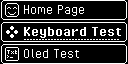
<style>
.page{position:relative;width:128px;height:64px;background:#000000}
.page>*{position:absolute;margin:0}
.t1{font:16px "PixelOperator";color:#ffffff}
.t2{font:16px "PixelOperator-Bold";color:#ffffff}
</style>
<div class="page">
<p class="t1" style="left:24px;top:5px;width:60px;height:11px">Home Page</p>
<p class="t2" style="left:24px;top:27px;width:97px;height:11px">Keyboard Test</p>
<p class="t1" style="left:24px;top:49px;width:55px;height:9px">Oled Test</p>
</div>
